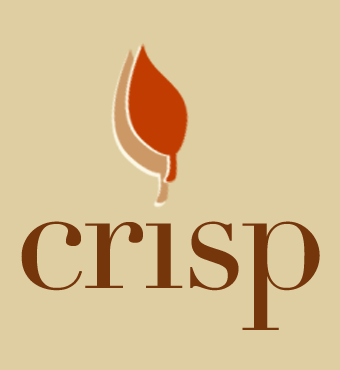
<style>
.page{position:relative;width:340px;height:370px;background:#dfcea1}
.page>*{position:absolute;margin:0}
.t1{font:150px "Didot";letter-spacing:-0.02em;color:#76360b}
</style>
<div class="page">
<p class="t1" style="left:21px;top:180px;width:299px;height:150px">crisp</p>
</div>
